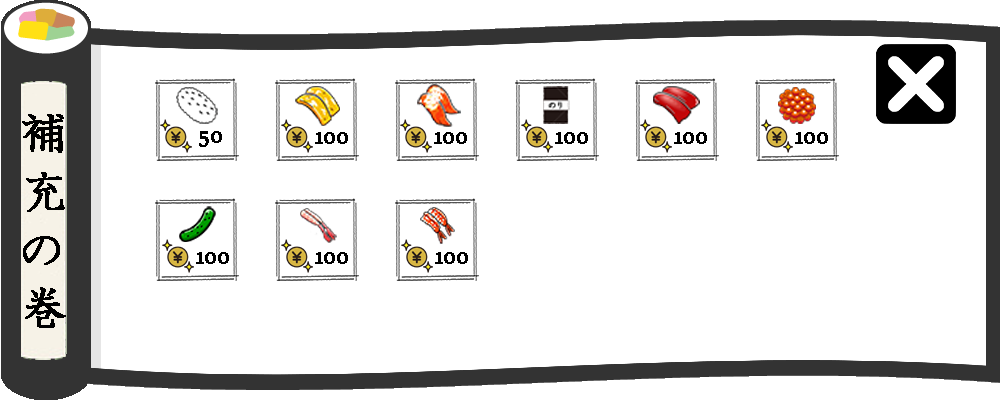
<style>
.page{position:relative;width:1000px;height:400px;background:#ffffff}
.page>*{position:absolute;margin:0}
.t1{font:48.6px/29.2px "HGPKyokashotai";color:#000000;font-weight:bold}
.t2{font:24.3px "SitkaBanner";color:#000000;font-weight:bold}
</style>
<div class="page">
<p class="t1" style="left:22px;top:114px;width:44px;height:214px">補<br><br>充<br><br>の<br><br>巻</p>
<p class="t2" style="left:199px;top:131px;width:23px;height:16px">50</p>
<p class="t2" style="left:315px;top:132px;width:33px;height:12px">100</p>
<p class="t2" style="left:434px;top:132px;width:33px;height:12px">100</p>
<p class="t2" style="left:555px;top:132px;width:33px;height:12px">100</p>
<p class="t2" style="left:674px;top:132px;width:33px;height:12px">100</p>
<p class="t2" style="left:795px;top:132px;width:33px;height:12px">100</p>
<p class="t2" style="left:196px;top:252px;width:33px;height:12px">100</p>
<p class="t2" style="left:315px;top:252px;width:33px;height:12px">100</p>
<p class="t2" style="left:435px;top:252px;width:33px;height:12px">100</p>
</div>
